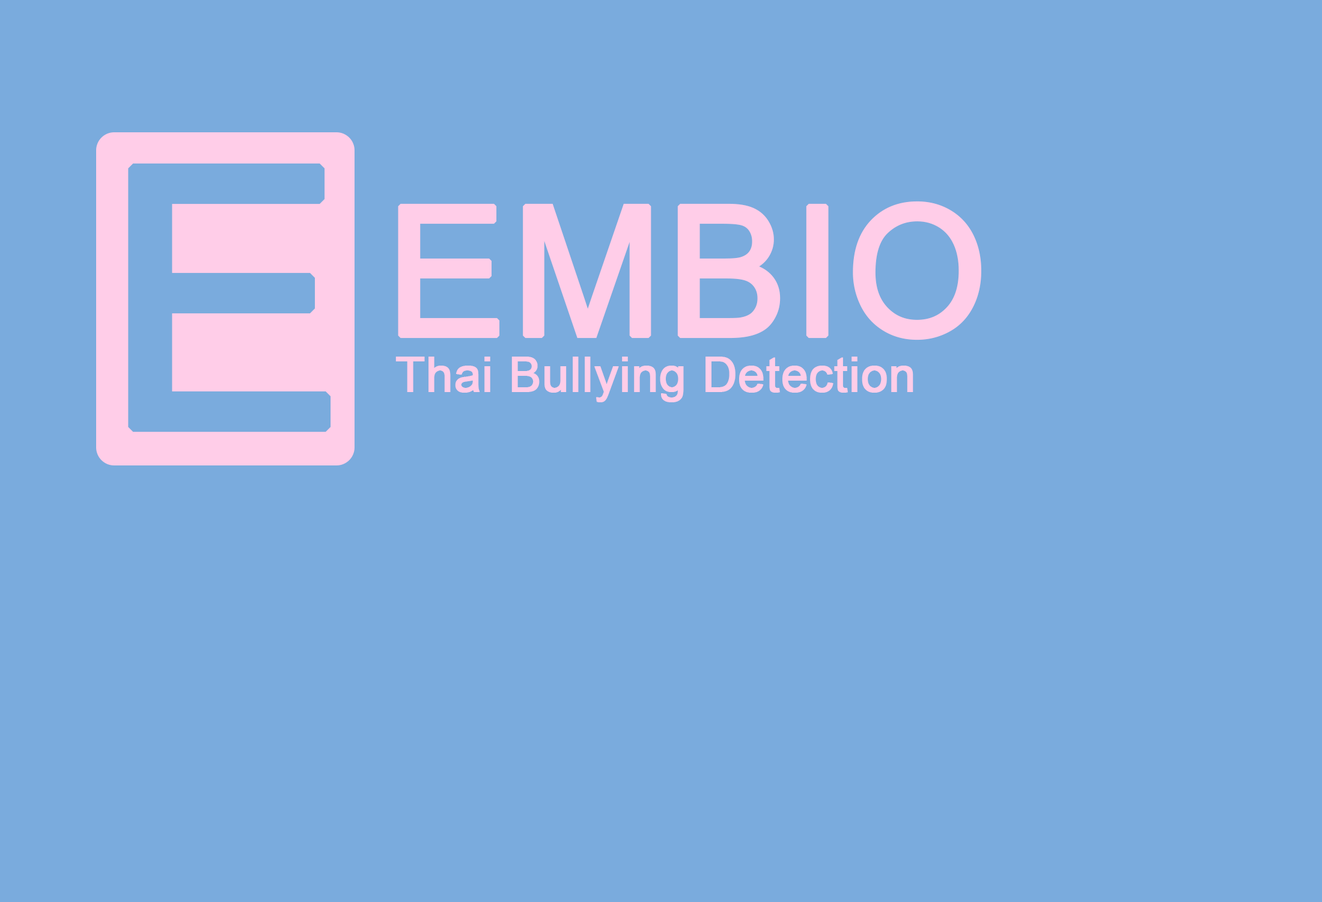
<style>
.page{position:relative;width:1322px;height:902px;background:#7aabdd}
.page>*{position:absolute;margin:0}
.t1{font:360.7px "ArialMT";color:#7aabdd;font-weight:bold}
.t2{font:180.3px "ArialMT";color:#ffcde8;font-weight:bold}
.t3{font:48.1px "ArialMT";color:#ffcde8;font-weight:bold}
</style>
<div class="page">
<p class="t1" style="left:128px;top:163px;width:203px;height:269px">E</p>
<p class="t2" style="left:398px;top:201px;width:584px;height:139px">EMBIO</p>
<p class="t3" style="left:396px;top:356px;width:518px;height:46px">Thai Bullying Detection</p>
</div>
